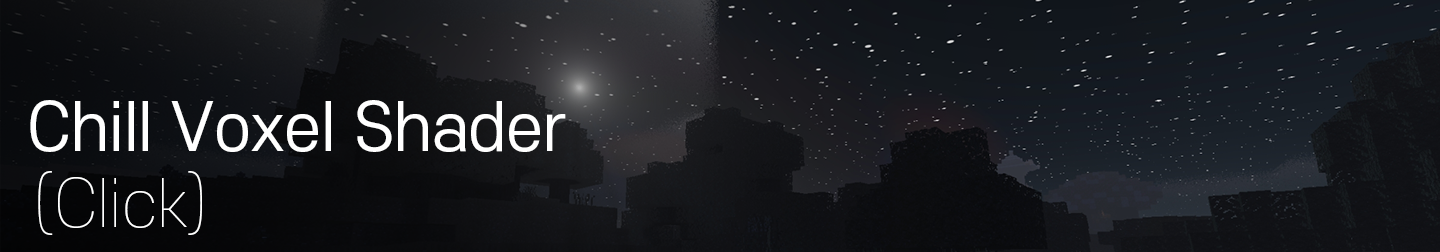
<style>
.page{position:relative;width:1440px;height:252px}
.page>*{position:absolute;margin:0}
.t1{font:64px "S-CoreDream-4Regular";color:#ffffff}
.t2{font:64px "S-CoreDream-1Thin";color:#ffffff}
</style>
<div class="page">
<p class="t1" style="left:30px;top:100px;width:536px;height:52px">Chill Voxel Shader</p>
<p class="t2" style="left:38px;top:171px;width:164px;height:64px">(Click)</p>
</div>
